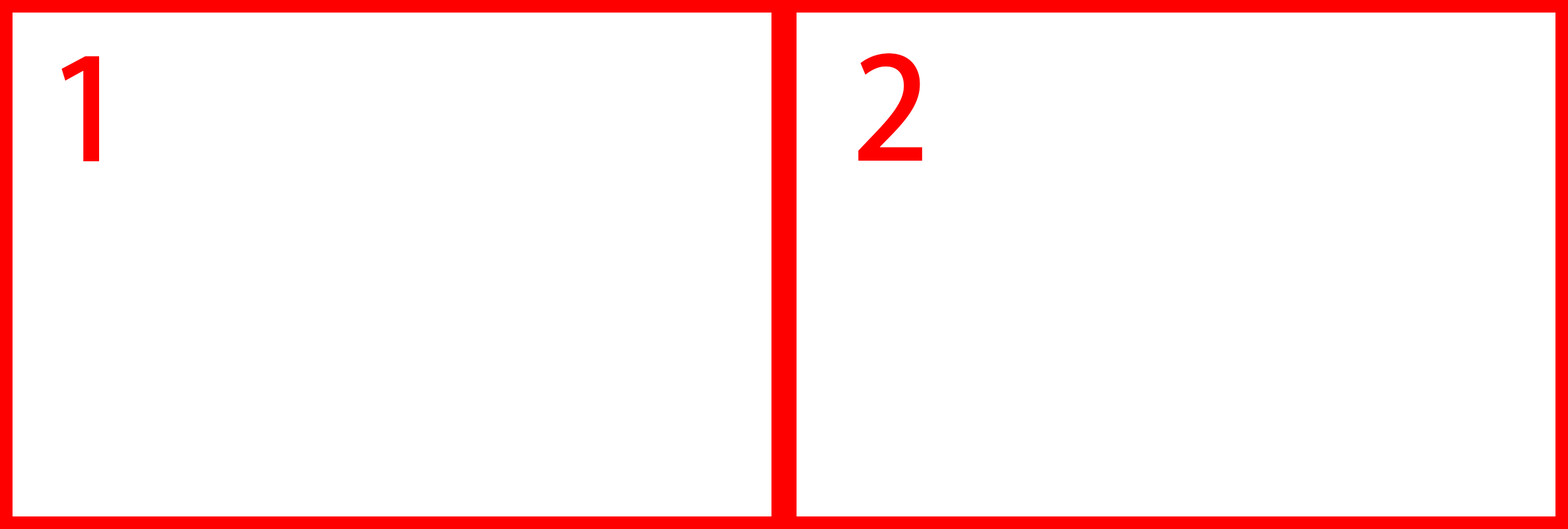
<style>
.page{position:relative;width:1568px;height:529px;background:#ffffff}
.page>*{position:absolute;margin:0}
.t1{font:139.7px "AdobeFanHeitiStd-Bold";color:#ff0000}
</style>
<div class="page">
<p class="t1" style="left:858px;top:53px;width:65px;height:108px">2</p>
<p class="t1" style="left:61px;top:56px;width:38px;height:105px">1</p>
</div>
